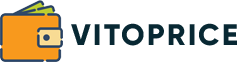
<style>
.page{position:relative;width:240px;height:62px;background:#ffffff}
.page>*{position:absolute;margin:0}
.t1{font:29.8px "Gilroy-ExtraBold";letter-spacing:0.08em;color:#082833}
</style>
<div class="page">
<p class="t1" style="left:71px;top:23px;width:166px;height:23px">VITOPRICE</p>
</div>
